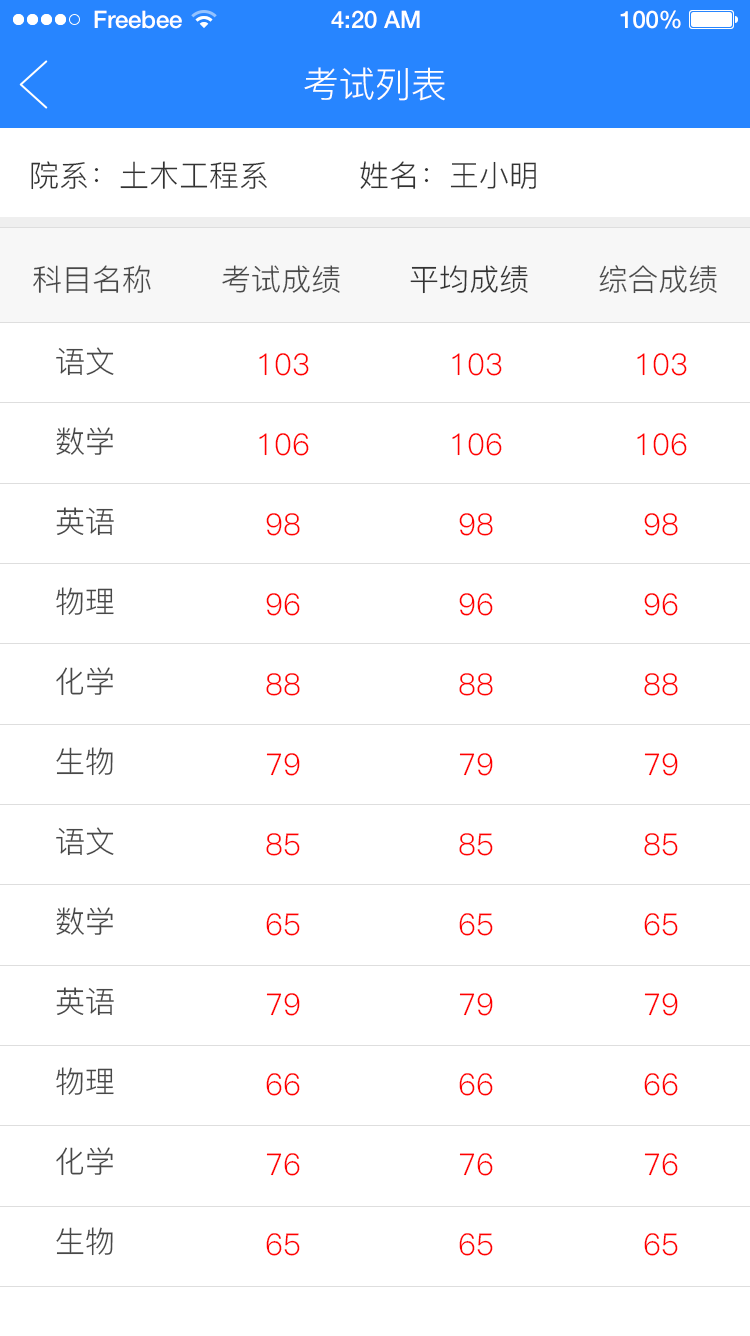
<style>
.page{position:relative;width:750px;height:1336px;background:#ffffff}
.page>*{position:absolute;margin:0}
.t1{font:24px "HelveticaNeue-Medium";color:#ffffff}
.t2{font:36px "PingFang-SC-Regular";color:#ffffff}
.t3{font:30px "PingFang-SC-Regular";color:#333333}
.t4{font:30px "PingFang-SC-Regular";color:#484848}
.t5{font:30px/80px "PingFang-SC-Regular";color:#484848}
.t6{font:30px/80px "PingFang-SC-Regular";color:#ff0000}
</style>
<div class="page">
<p class="t1" style="left:94px;top:10px;width:88px;height:19px">Freebee</p>
<p class="t1" style="left:331px;top:10px;width:89px;height:19px">4:20 AM</p>
<p class="t1" style="left:620px;top:10px;width:61px;height:19px">100%</p>
<p class="t2" style="left:304px;top:67px;width:141px;height:34px">考试列表</p>
<p class="t3" style="left:31px;top:161px;width:505px;height:29px">院系：土木工程系         姓名：王小明</p>
<p class="t4" style="left:33px;top:265px;width:118px;height:29px">科目名称</p>
<p class="t4" style="left:222px;top:265px;width:118px;height:28px">考试成绩</p>
<p class="t3" style="left:410px;top:265px;width:118px;height:29px">平均成绩</p>
<p class="t4" style="left:599px;top:265px;width:118px;height:29px">综合成绩</p>
<p class="t5" style="left:56px;top:347px;width:58px;height:909px">语文<br>数学<br>英语<br>物理 <br>化学<br>生物<br>语文<br>数学<br>英语<br>物理 <br>化学<br>生物</p>
<p class="t6" style="left:259px;top:353px;width:50px;height:903px;text-align:center">103<br>106<br>98<br>96<br>88<br>79<br>85<br>65<br>79<br>66<br>76<br>65</p>
<p class="t6" style="left:452px;top:353px;width:50px;height:903px;text-align:center">103<br>106<br>98<br>96<br>88<br>79<br>85<br>65<br>79<br>66<br>76<br>65</p>
<p class="t6" style="left:637px;top:353px;width:50px;height:903px;text-align:center">103<br>106<br>98<br>96<br>88<br>79<br>85<br>65<br>79<br>66<br>76<br>65</p>
</div>
